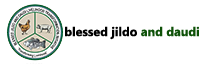
<style>
.page{position:relative;width:200px;height:68px;background:#ffffff}
.page>*{position:absolute;margin:0}
.t1{font:12.5px "MicrosoftPhagsPa-Bold";color:#000000}
.t2{font:12.5px "MicrosoftPhagsPa-Bold";color:#0e5108}
</style>
<div class="page">
<p class="t1" style="left:65px;top:26px;width:134px;height:14px">blessed jildo <span class="t2">and daudi</span></p>
</div>
